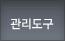
<style>
.page{position:relative;width:65px;height:41px}
.page>*{position:absolute;margin:0}
.t1{font:12px "YGO540";color:#fcfcfc}
</style>
<div class="page">
<p class="t1" style="left:10px;top:18px;width:44px;height:12px">관리도구</p>
</div>
